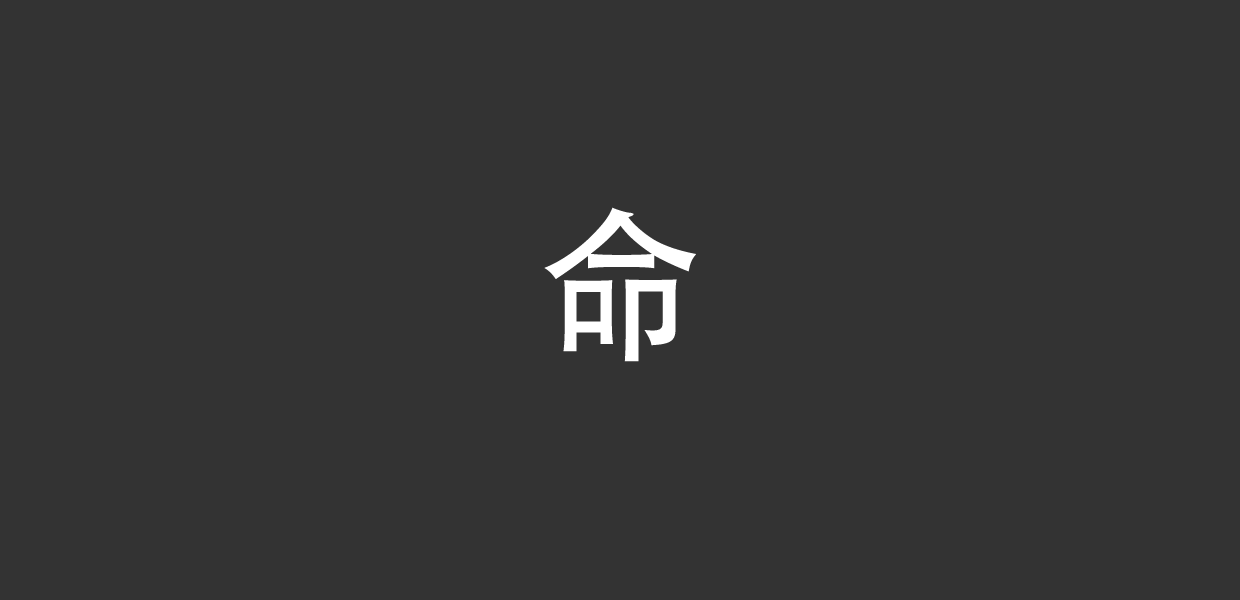
<style>
.page{position:relative;width:1240px;height:600px;background:#333333}
.page>*{position:absolute;margin:0}
.t1{font:160px "AdobeHeitiStd-Regular";color:#ffffff}
</style>
<div class="page">
<p class="t1" style="left:544px;top:207px;width:152px;height:155px">命</p>
</div>
